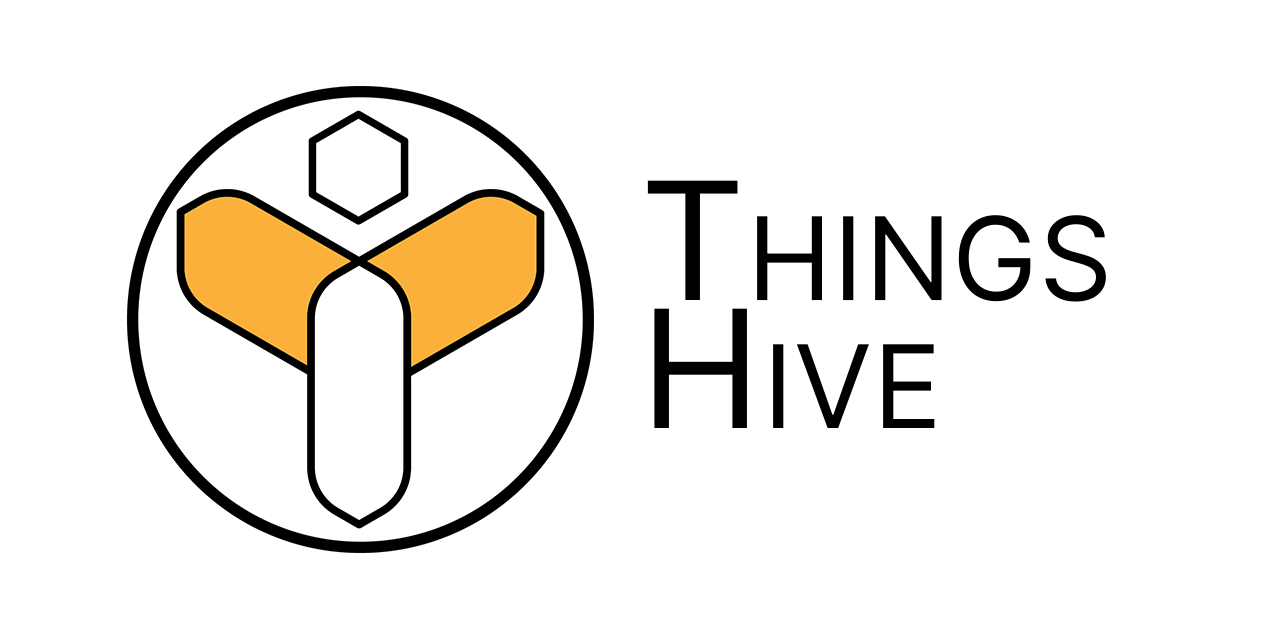
<style>
.page{position:relative;width:1280px;height:640px;background:#ffffff}
.page>*{position:absolute;margin:0}
.t1{font:164px "InterV";letter-spacing:0.01em;color:#000000;font-variant:small-caps}
</style>
<div class="page">
<p class="t1" style="left:647px;top:180px;width:459px;height:248px">Things Hive</p>
</div>
